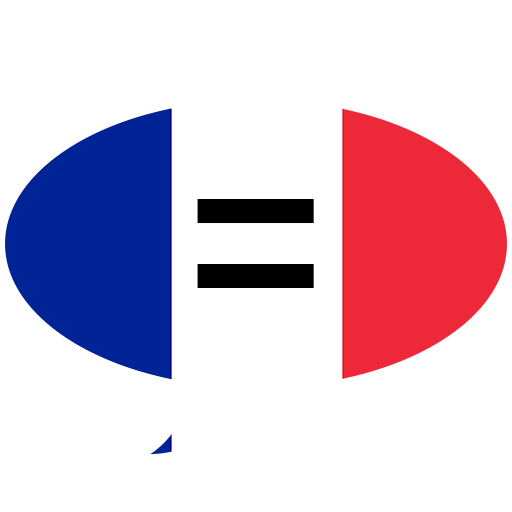
<style>
.page{position:relative;width:512px;height:512px;background:#ffffff}
.page>*{position:absolute;margin:0}
.t1{font:300px "ArialNarrow";color:#000000}
</style>
<div class="page">
<p class="t1" style="left:197px;top:199px;width:117px;height:89px">=</p>
</div>
